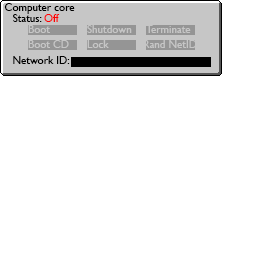
<style>
.page{position:relative;width:256px;height:256px;background:#ffffff}
.page>*{position:absolute;margin:0}
.t1{font:11px "GillSansMT";color:#000000}
.t2{font:11px "GillSansMT";color:#fe0000}
.t3{font:11px "GillSansMT";color:#c6c6c6}
</style>
<div class="page">
<p class="t1" style="left:4px;top:3px;width:71px;height:11px">Computer core</p>
<p class="t1" style="left:13px;top:14px;width:47px;height:8px">Status: <span class="t2">Off</span></p>
<p class="t3" style="left:28px;top:25px;width:22px;height:8px">Boot</p>
<p class="t3" style="left:87px;top:25px;width:45px;height:8px">Shutdown</p>
<p class="t3" style="left:146px;top:25px;width:45px;height:8px">Terminate</p>
<p class="t3" style="left:28px;top:40px;width:41px;height:8px">Boot CD</p>
<p class="t3" style="left:87px;top:40px;width:22px;height:8px">Lock</p>
<p class="t3" style="left:143px;top:40px;width:59px;height:8px">Rand NetIDF</p>
<p class="t1" style="left:13px;top:56px;width:57px;height:8px">Network ID:</p>
</div>
